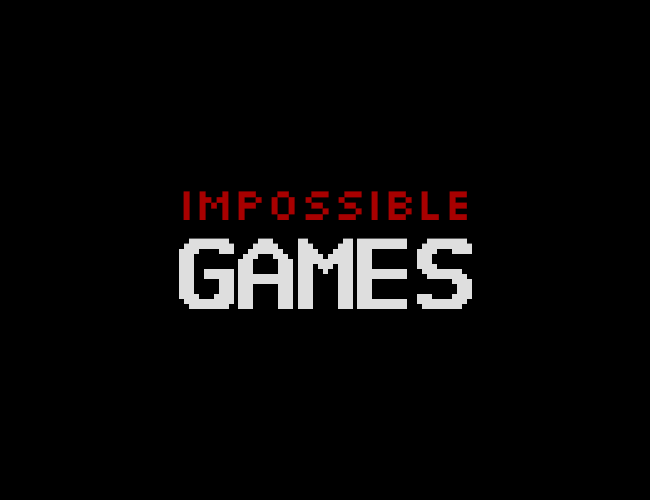
<style>
.page{position:relative;width:650px;height:500px;background:#000000}
.page>*{position:absolute;margin:0}
.t1{font:48px "Silkscreen";letter-spacing:-0.02em;color:#a80000}
.t2{font:90px "KindlyRewind";letter-spacing:-0.01em;color:#dedede}
</style>
<div class="page">
<p class="t1" style="left:183px;top:191px;width:284px;height:29px">IMPOSSIBLE</p>
<p class="t2" style="left:179px;top:238px;width:293px;height:71px">GAMES</p>
</div>
